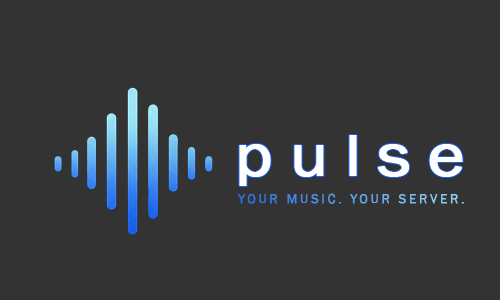
<style>
.page{position:relative;width:500px;height:300px;background:#333333}
.page>*{position:absolute;margin:0}
.t1{font:59.5px "FranklinGothic-Book";letter-spacing:0.22em;color:#ffffff;font-weight:bold;scale:1.18 1}
.t2{font:13.4px "FranklinGothic-Book";letter-spacing:0.18em;font-weight:bold}
</style>
<div class="page">
<p class="t1" style="left:239px;top:135px;width:224px;height:51px">pulse</p>
<p class="t2" style="left:237px;top:193px;width:227px;height:11px">YOUR MUSIC. YOUR SERVER.</p>
</div>
